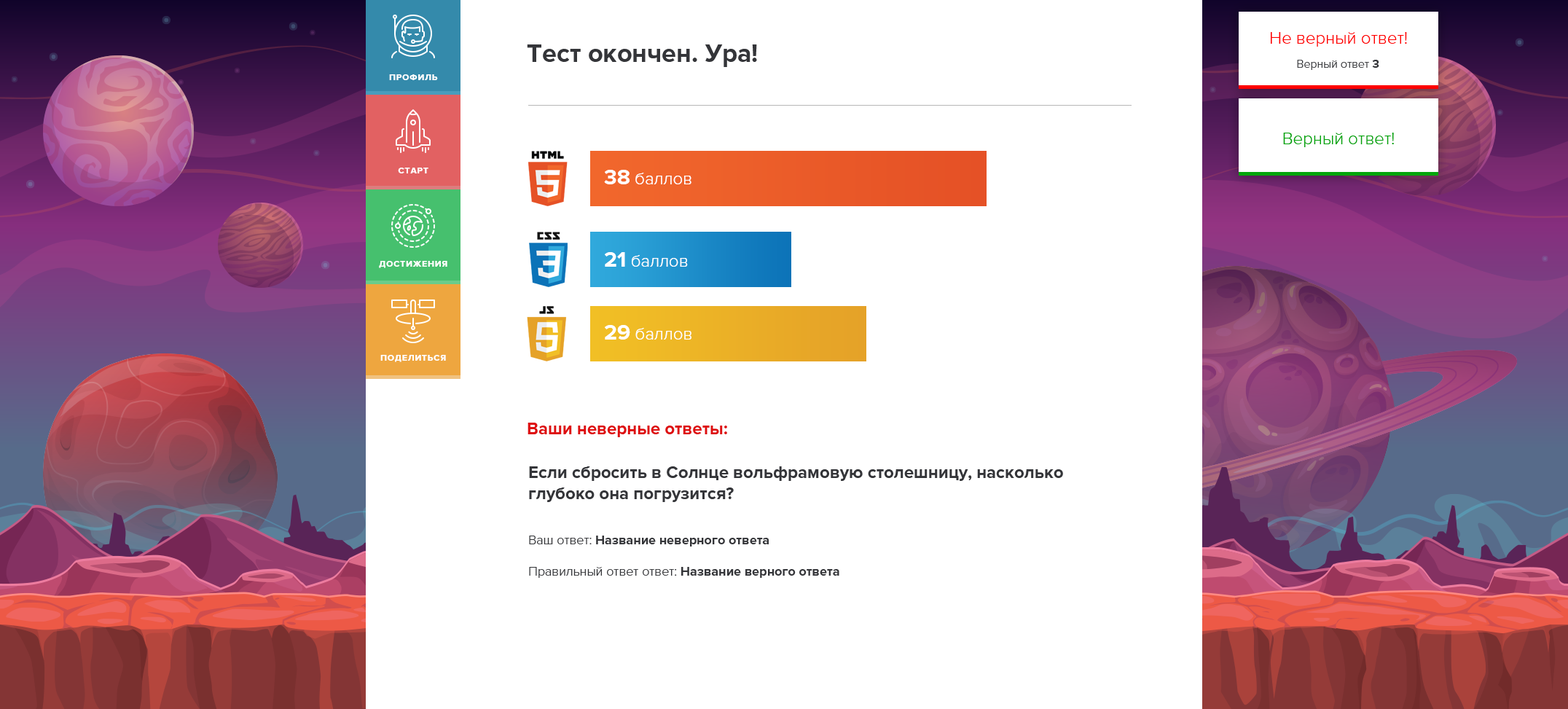
<style>
.page{position:relative;width:1568px;height:709px;background:#ffffff}
.page>*{position:absolute;margin:0}
.t1{font:17.5px "ProximaNova-Light";color:#ff0000}
.t2{font:26.2px "ProximaNova-Bold";color:#343539}
.t3{font:11.7px "ProximaNova-Light";color:#343539}
.t4{font:11.7px "ProximaNova-Bold";color:#343539}
.t5{font:8.7px "ProximaNova-Bold";letter-spacing:0.075em;color:#ffffff;text-transform:uppercase}
.t6{font:17.5px "ProximaNova-Light";color:#03a50b}
.t7{font:17.5px "ProximaNova-Light";color:#ffffff}
.t8{font:21.9px "ProximaNova-Bold";color:#ffffff}
.t9{font:17.5px "ProximaNova-Bold";color:#de0e10}
.t10{font:17.5px "ProximaNova-Bold";color:#343539}
.t11{font:13.1px "ProximaNova-Bold";color:#343539}
.t12{font:13.1px "ProximaNova-Light";color:#343539}
</style>
<div class="page">
<p class="t1" style="left:1271px;top:32px;width:136px;height:15px">Не верный ответ!</p>
<p class="t2" style="left:527px;top:44px;width:230px;height:23px">Тест окончен. Ура!</p>
<p class="t3" style="left:1297px;top:60px;width:82px;height:10px">Верный ответ <span class="t4">3</span></p>
<p class="t5" style="left:389px;top:74px;width:49px;height:6px">профиль</p>
<p class="t6" style="left:1283px;top:133px;width:111px;height:14px">Верный ответ!</p>
<p class="t5" style="left:398px;top:168px;width:30px;height:5px">старт</p>
<p class="t7" style="left:604px;top:170px;width:87px;height:14px"><span class="t8">38</span> баллов</p>
<p class="t7" style="left:605px;top:252px;width:83px;height:15px"><span class="t8">21</span> баллов</p>
<p class="t5" style="left:379px;top:261px;width:68px;height:7px">достижения</p>
<p class="t7" style="left:605px;top:325px;width:86px;height:15px"><span class="t8">29</span> баллов</p>
<p class="t5" style="left:380px;top:355px;width:66px;height:7px">поделиться</p>
<p class="t9" style="left:528px;top:423px;width:199px;height:14px">Ваши неверные ответы:</p>
<p class="t10" style="left:529px;top:466px;width:534px;height:36px">Если сбросить в Солнце вольфрамовую столешницу, насколько глубоко она погрузится?</p>
<p class="t11" style="left:529px;top:536px;width:310px;height:42px"><span class="t12">Ваш ответ: </span>Название неверного ответа<br><span class="t12"><br>Правильный ответ ответ: </span>Название верного ответа</p>
</div>
